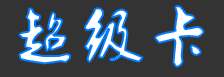
<style>
.page{position:relative;width:224px;height:77px;background:#333333}
.page>*{position:absolute;margin:0}
.t1{font:59.7px "2.0-";letter-spacing:0.16em;color:#ffffff}
</style>
<div class="page">
<p class="t1" style="left:19px;top:6px;width:185px;height:61px">超级卡</p>
</div>
